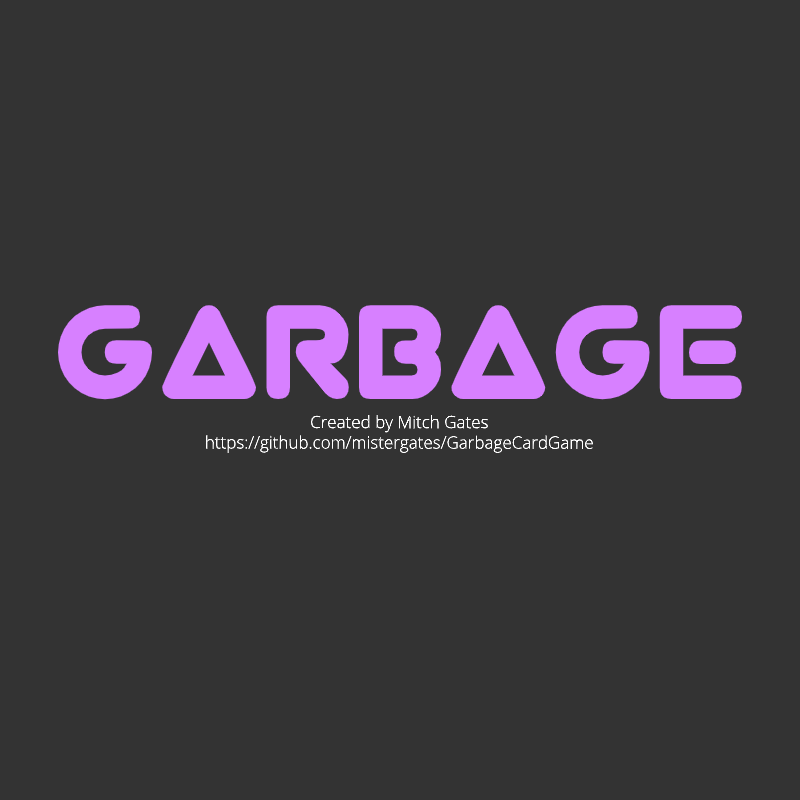
<style>
.page{position:relative;width:800px;height:800px;background:#333333}
.page>*{position:absolute;margin:0}
.t1{font:150px "Virgo01";color:#d780ff}
.t2{font:17px "OpenSans-Light";color:#ffffff}
</style>
<div class="page">
<p class="t1" style="left:58px;top:305px;width:684px;height:95px">Garbage</p>
<p class="t2" style="left:206px;top:415px;width:387px;height:38px;text-align:center">Created by Mitch Gates<br>https://github.com/mistergates/GarbageCardGame</p>
</div>
